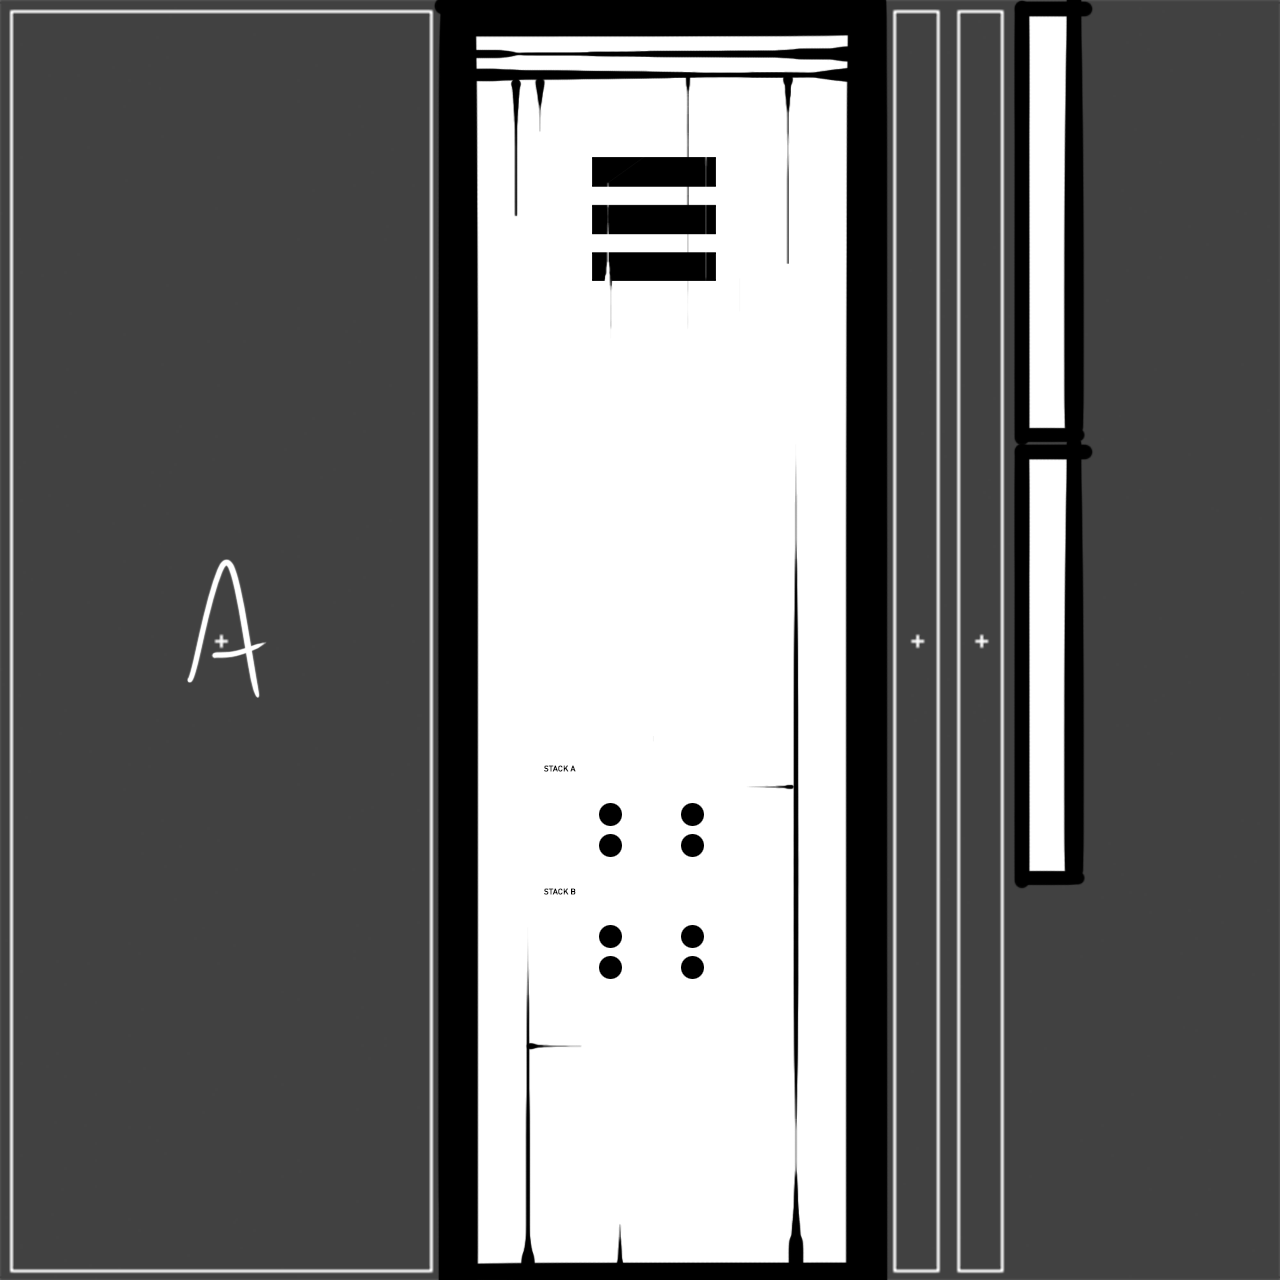
<style>
.page{position:relative;width:1280px;height:1280px;background:#414141}
.page>*{position:absolute;margin:0}
.t1{font:8px "DIN-Regular";letter-spacing:-0.01em;color:#000000;font-weight:bold}
</style>
<div class="page">
<p class="t1" style="left:544px;top:765px;width:32px;height:7px">STACK A</p>
<p class="t1" style="left:544px;top:888px;width:32px;height:7px">STACK B</p>
</div>
